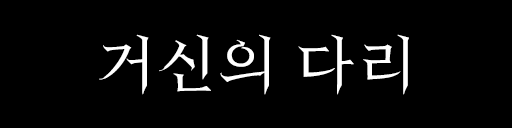
<style>
.page{position:relative;width:512px;height:128px;background:#000000}
.page>*{position:absolute;margin:0}
.t1{font:60px "HeirofLightRegular";letter-spacing:0.025em;color:#ffffff}
</style>
<div class="page">
<p class="t1" style="left:99px;top:34px;width:310px;height:61px">거신의 다리</p>
</div>
